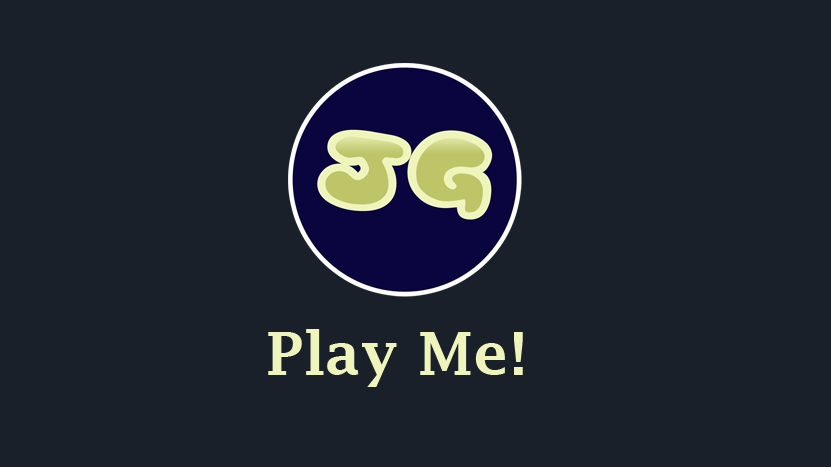
<style>
.page{position:relative;width:831px;height:467px;background:#1a2029}
.page>*{position:absolute;margin:0}
.t1{font:60px "LucidaFax-Demi";color:#eff4bc}
</style>
<div class="page">
<p class="t1" style="left:268px;top:329px;width:255px;height:58px">Play Me!</p>
</div>
